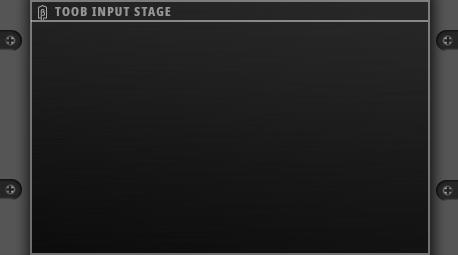
<style>
.page{position:relative;width:458px;height:255px}
.page>*{position:absolute;margin:0}
.t1{font:12px "NotoSans-CondensedExtraBold";letter-spacing:0.1em;color:#959595}
</style>
<div class="page">
<p class="t1" style="left:55px;top:7px;width:116px;height:9px">TOOB INPUT STAGE</p>
</div>
